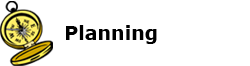
<style>
.page{position:relative;width:250px;height:66px;background:#ffffff}
.page>*{position:absolute;margin:0}
.t1{font:19px "Verdana-Bold";color:#000000}
</style>
<div class="page">
<p class="t1" style="left:66px;top:25px;width:91px;height:19px">Planning</p>
</div>
